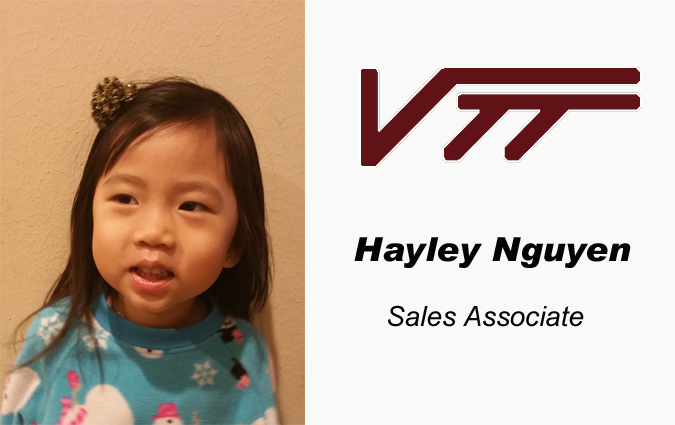
<style>
.page{position:relative;width:675px;height:425px;background:#f9f9f7}
.page>*{position:absolute;margin:0}
.t1{font:33.3px "Arial-BlackItalic";color:#040404}
.t2{font:27.8px "Arial-ItalicMT";color:#040404}
</style>
<div class="page">
<p class="t1" style="left:354px;top:237px;width:277px;height:31px">Hayley Nguyen</p>
<p class="t2" style="left:388px;top:305px;width:196px;height:22px">Sales Associate</p>
</div>
